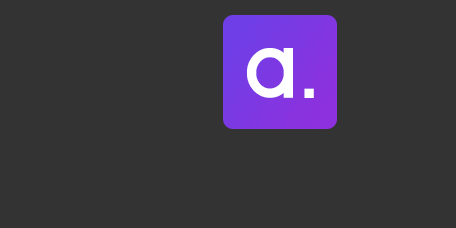
<style>
.page{position:relative;width:456px;height:228px;background:#333333}
.page>*{position:absolute;margin:0}
.t1{font:92.3px "Elevationnormal";color:#ffffff}
</style>
<div class="page">
<p class="t1" style="left:247px;top:48px;width:67px;height:50px">a.</p>
</div>
